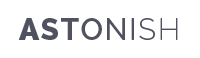
<style>
.page{position:relative;width:200px;height:58px;background:#ffffff}
.page>*{position:absolute;margin:0}
.t1{font:30px "Raleway-Heavy";letter-spacing:0.05em;color:#50525f}
.t2{font:30px "Raleway-ExtraBold";letter-spacing:0.05em;color:#50525f}
.t3{font:30px "Raleway-Bold";letter-spacing:0.05em;color:#50525f}
.t4{font:30px "Raleway-SemiBold";letter-spacing:0.05em;color:#50525f}
.t5{font:30px "Raleway-Medium";letter-spacing:0.05em;color:#50525f}
.t6{font:30px "Raleway-Regular";letter-spacing:0.05em;color:#50525f}
.t7{font:30px "Raleway-Light";letter-spacing:0.05em;color:#50525f}
.t8{font:30px "Raleway-ExtraLight";letter-spacing:0.05em;color:#50525f}
</style>
<div class="page">
<p class="t1" style="left:18px;top:18px;width:160px;height:22px">A<span class="t2">S</span><span class="t3">T</span><span class="t4">O</span><span class="t5">N</span><span class="t6">I</span><span class="t7">S</span><span class="t8">H</span></p>
</div>
